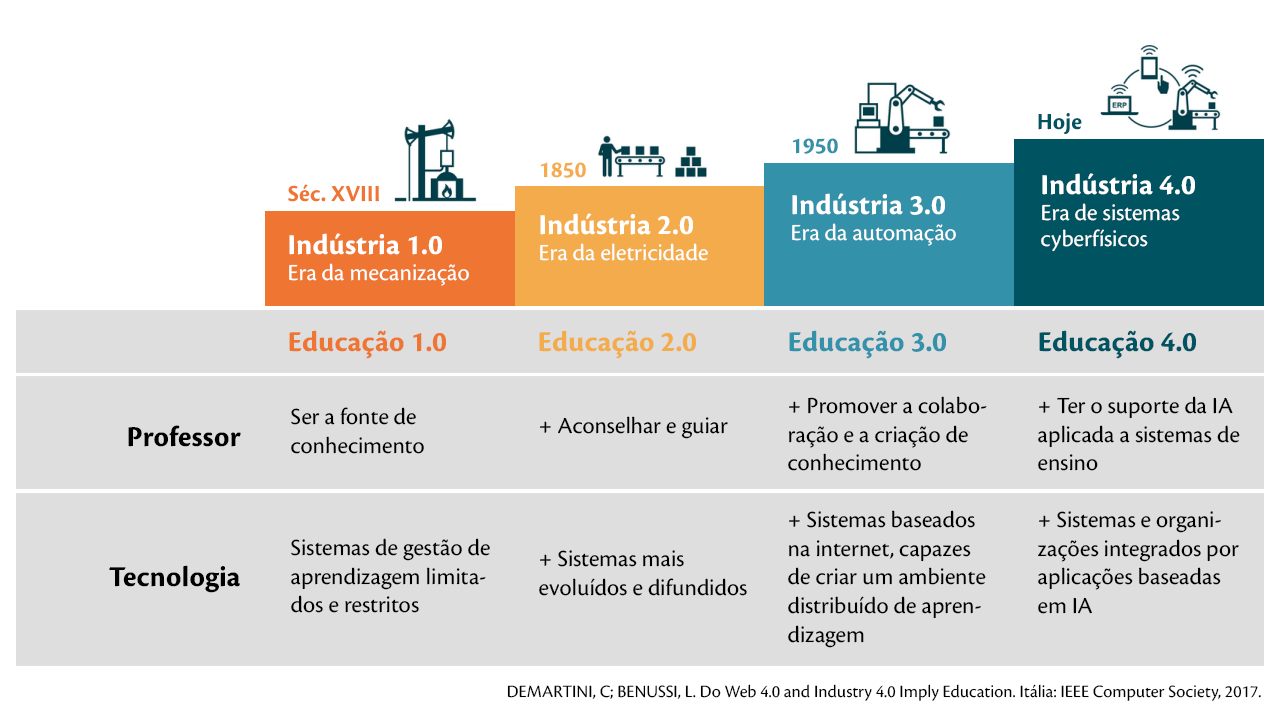
<style>
.page{position:relative;width:1280px;height:720px;background:#dedede}
.page>*{position:absolute;margin:0}
.t1{font:24px "CronosPro-Bold";color:#005361}
.t2{font:24px "CronosPro-Bold";color:#3391aa}
.t3{font:24px "CronosPro-Bold";color:#f4ab4c}
.t4{font:30px "CronosPro-Bold";color:#ffffff}
.t5{font:24px "CronosPro-Bold";color:#ef7532}
.t6{font:24px/26px "CronosPro-Regular";color:#ffffff}
.t7{font:24px "CronosPro-Regular";color:#ffffff}
.t8{font:30px "CronosPro-Bold";color:#ef7532}
.t9{font:30px "CronosPro-Bold";color:#f4ab4c}
.t10{font:30px "CronosPro-Bold";color:#3391aa}
.t11{font:30px "CronosPro-Bold";color:#005361}
.t12{font:24px "CronosPro-Regular";color:#000000}
.t13{font:30px "CronosPro-Bold";color:#000000}
.t14{font:18px "CronosPro-Regular";color:#000000}
</style>
<div class="page">
<p class="t1" style="left:1038px;top:113px;width:44px;height:21px">Hoje</p>
<p class="t2" style="left:792px;top:138px;width:46px;height:16px">1950</p>
<p class="t3" style="left:540px;top:162px;width:46px;height:16px">1850</p>
<p class="t4" style="left:1042px;top:173px;width:153px;height:22px">Indústria 4.0</p>
<p class="t5" style="left:288px;top:184px;width:91px;height:18px">Séc. XVIII</p>
<p class="t4" style="left:792px;top:193px;width:153px;height:22px">Indústria 3.0</p>
<p class="t6" style="left:1041px;top:203px;width:139px;height:49px">Era de sistemas <br>cyberfísicos</p>
<p class="t4" style="left:540px;top:213px;width:153px;height:22px">Indústria 2.0</p>
<p class="t4" style="left:289px;top:233px;width:153px;height:22px">Indústria 1.0</p>
<p class="t7" style="left:792px;top:223px;width:164px;height:23px">Era da automação</p>
<p class="t7" style="left:540px;top:243px;width:168px;height:18px">Era da eletricidade</p>
<p class="t7" style="left:289px;top:263px;width:180px;height:23px">Era da mecanização</p>
<p class="t8" style="left:289px;top:330px;width:157px;height:29px">Educação 1.0</p>
<p class="t9" style="left:539px;top:330px;width:157px;height:29px">Educação 2.0</p>
<p class="t10" style="left:789px;top:330px;width:157px;height:29px">Educação 3.0</p>
<p class="t11" style="left:1039px;top:330px;width:157px;height:29px">Educação 4.0</p>
<p class="t12" style="left:788px;top:396px;width:199px;height:75px">+ Promover a colaboração e a criação de conhecimento</p>
<p class="t12" style="left:1038px;top:396px;width:202px;height:75px">+ Ter o suporte da IA aplicada a sistemas de ensino</p>
<p class="t12" style="left:291px;top:407px;width:133px;height:47px">Ser a fonte de <br>conhecimento</p>
<p class="t13" style="left:128px;top:425px;width:113px;height:22px">Professor</p>
<p class="t12" style="left:540px;top:416px;width:188px;height:23px">+ Aconselhar e guiar</p>
<p class="t12" style="left:788px;top:510px;width:198px;height:138px">+ Sistemas baseados na internet, capazes de criar um ambiente distribuído de aprendizagem</p>
<p class="t12" style="left:1038px;top:511px;width:201px;height:103px">+ Sistemas e organizações integrados por aplicações baseadas em IA</p>
<p class="t12" style="left:291px;top:538px;width:199px;height:75px">Sistemas de gestão de aprendizagem limitados e restritos</p>
<p class="t12" style="left:539px;top:550px;width:208px;height:46px">+ Sistemas mais evoluídos e difundidos</p>
<p class="t13" style="left:109px;top:565px;width:131px;height:28px">Tecnologia</p>
<p class="t14" style="left:507px;top:684px;width:754px;height:17px">DEMARTINI, C; BENUSSI, L. Do Web 4.0 and Industry 4.0 Imply Education. Itália: IEEE Computer Society, 2017.</p>
</div>
